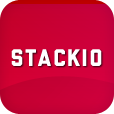
<style>
.page{position:relative;width:114px;height:114px}
.page>*{position:absolute;margin:0}
.t1{font:24px "Liberator";letter-spacing:0.05em;color:#ffffff}
</style>
<div class="page">
<p class="t1" style="left:11px;top:49px;width:91px;height:17px">Stackio</p>
</div>
